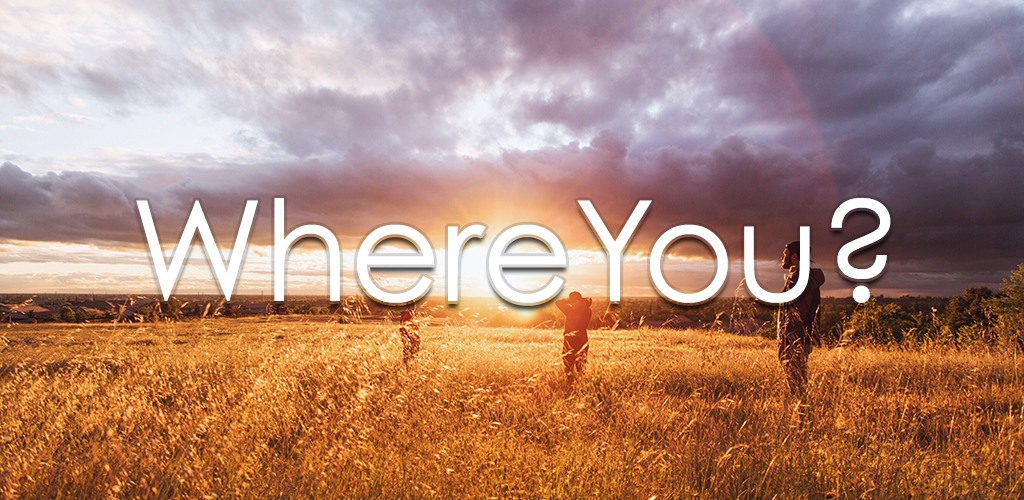
<style>
.page{position:relative;width:1024px;height:500px}
.page>*{position:absolute;margin:0}
.t1{font:140px "CenturyGothic";color:#ffffff}
</style>
<div class="page">
<p class="t1" style="left:136px;top:198px;width:755px;height:105px">WhereYou?</p>
</div>
